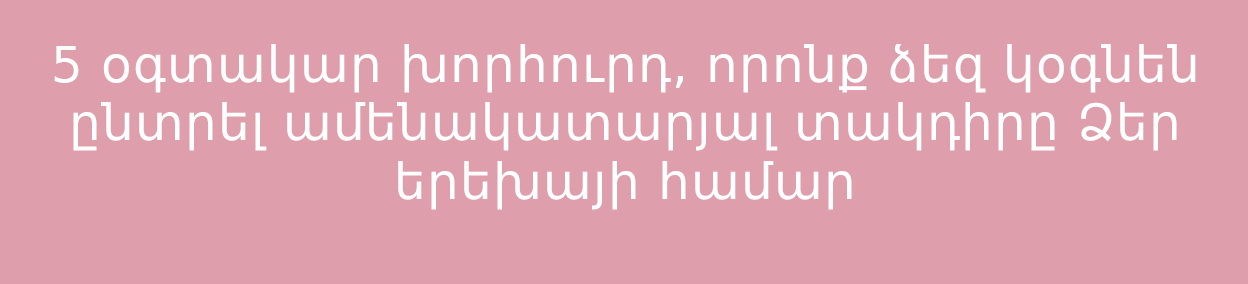
<style>
.page{position:relative;width:1248px;height:284px;background:#de9eac}
.page>*{position:absolute;margin:0}
.t1{font:50px/58.3px "DejaVuSans";letter-spacing:0.025em;color:#ffffff}
</style>
<div class="page">
<p class="t1" style="left:54px;top:44px;width:1142px;height:166px;text-align:center">5 օգտակար խորհուրդ, որոնք ձեզ կօգնեն ընտրել ամենակատարյալ տակդիրը Ձեր երեխայի համար</p>
</div>
